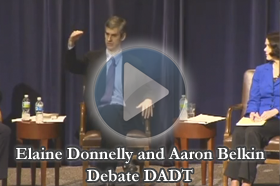
<style>
.page{position:relative;width:280px;height:186px}
.page>*{position:absolute;margin:0}
.t1{font:17.2px/21.8px "Garamond-Bold";color:#ffffff}
</style>
<div class="page">
<p class="t1" style="left:16px;top:147px;width:249px;height:35px;text-align:center">Elaine Donnelly and Aaron Belkin<br>Debate DADT</p>
</div>
